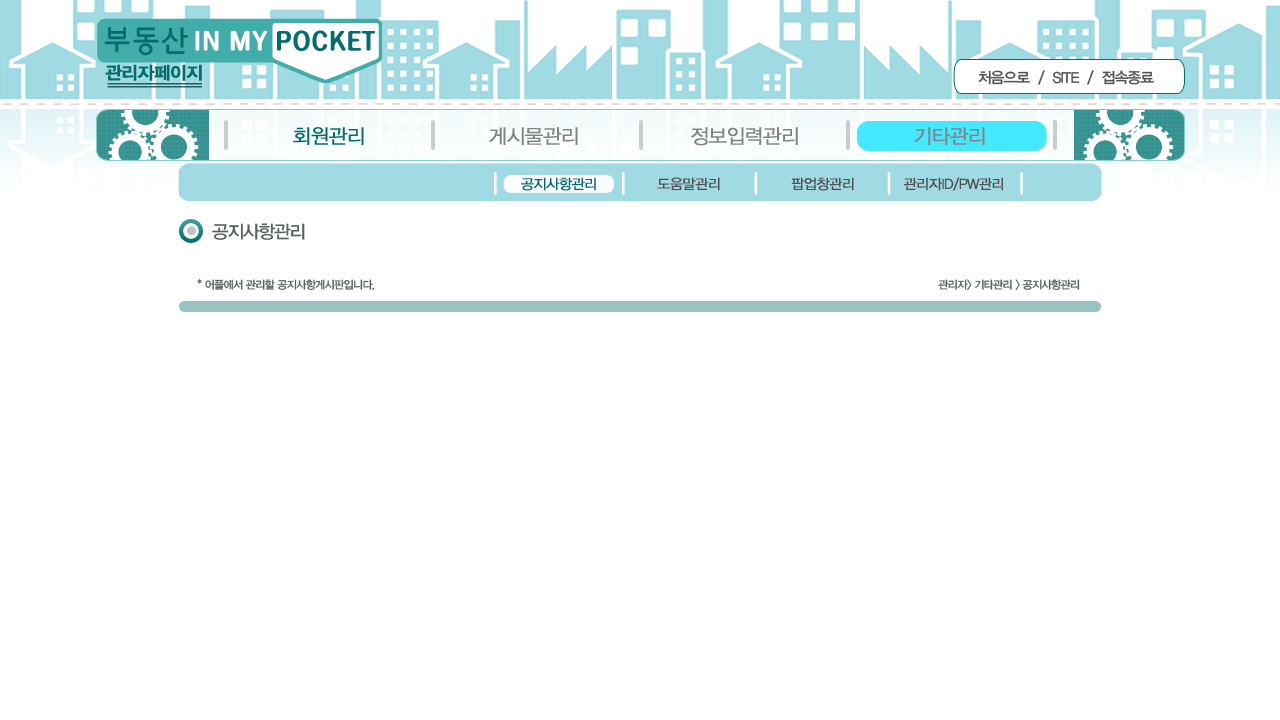
<style>
.page{position:relative;width:1280px;height:720px;background:#ffffff}
.page>*{position:absolute;margin:0}
.t1{font:17.8px "YDIYGO340";letter-spacing:-0.04em;color:#036d6d;font-weight:bold}
.t2{font:15px "YDIYGO330";letter-spacing:-0.06em;color:#535353}
.t3{font:20px "YDIYGO320";letter-spacing:-0.04em;color:#036d6d;font-weight:bold}
.t4{font:20px "YDIYGO320";letter-spacing:-0.04em;color:#838383;font-weight:bold}
.t5{font:14px "YDIYGO320";letter-spacing:-0.04em;color:#036d6d;font-weight:bold}
.t6{font:14px "YDIYGO320";letter-spacing:-0.04em;color:#4f4f4f;font-weight:bold}
.t7{font:18px "YDIYGO330";letter-spacing:-0.06em;color:#576262}
.t8{font:11px "YDIYGO330";letter-spacing:-0.06em;color:#576262}
</style>
<div class="page">
<p class="t1" style="left:105px;top:64px;width:97px;height:17px">관리자페이지</p>
<p class="t2" style="left:978px;top:70px;width:176px;height:15px">처음으로  /  SITE  /  접속종료</p>
<p class="t3" style="left:293px;top:127px;width:71px;height:18px">회원관리</p>
<p class="t4" style="left:489px;top:127px;width:89px;height:18px">게시물관리</p>
<p class="t4" style="left:691px;top:127px;width:107px;height:19px">정보입력관리</p>
<p class="t4" style="left:914px;top:127px;width:71px;height:18px">기타관리</p>
<p class="t5" style="left:521px;top:177px;width:75px;height:14px">공지사항관리</p>
<p class="t6" style="left:657px;top:177px;width:63px;height:14px">도움말관리</p>
<p class="t6" style="left:791px;top:177px;width:63px;height:14px">팝업창관리</p>
<p class="t6" style="left:904px;top:177px;width:99px;height:14px">관리자ID/PW관리</p>
<p class="t7" style="left:212px;top:223px;width:93px;height:17px">공지사항관리</p>
<p class="t8" style="left:197px;top:279px;width:178px;height:11px">* 어플에서 관리할 공지사항게시판입니다.</p>
<p class="t8" style="left:938px;top:279px;width:142px;height:12px">관리자&gt; 기타관리 &gt; 공지사항관리</p>
</div>
